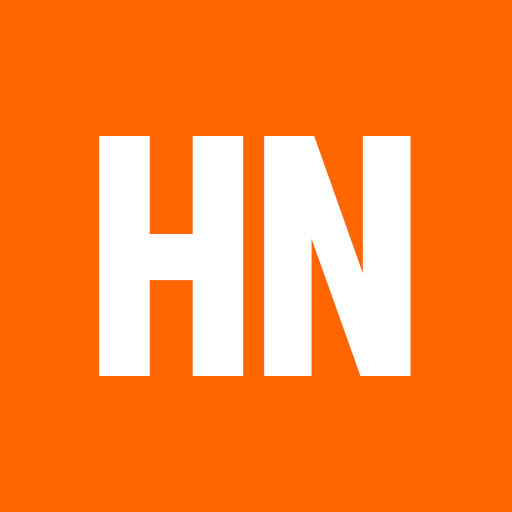
<style>
.page{position:relative;width:512px;height:512px;background:#ff6600}
.page>*{position:absolute;margin:0}
.t1{font:340px "AldotheApache";color:#ffffff}
</style>
<div class="page">
<p class="t1" style="left:99px;top:136px;width:312px;height:240px">HN</p>
</div>
